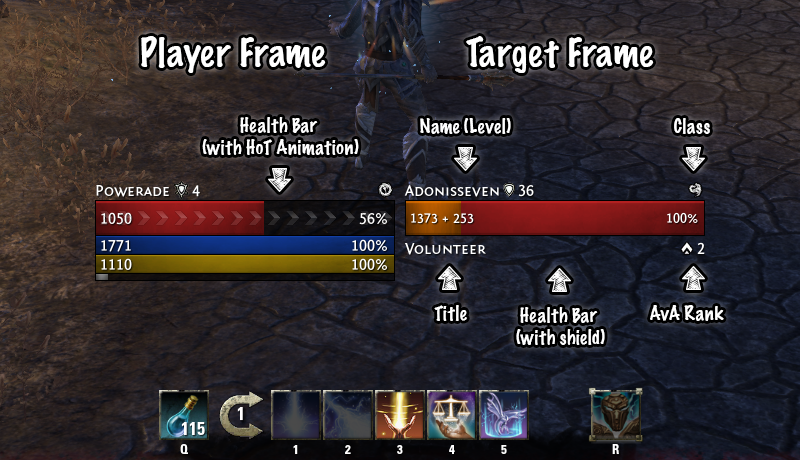
<style>
.page{position:relative;width:800px;height:460px}
.page>*{position:absolute;margin:0}
.t1{font:36px "MarkerFelt-Thin";color:#ffffff}
.t2{font:18px "MarkerFelt-Thin";color:#ffffff}
</style>
<div class="page">
<p class="t1" style="left:141px;top:36px;width:185px;height:37px">Player Frame</p>
<p class="t1" style="left:466px;top:36px;width:188px;height:37px">Target Frame</p>
<p class="t2" style="left:202px;top:117px;width:157px;height:38px;text-align:center">Health Bar <br>(with HoT Animation)</p>
<p class="t2" style="left:420px;top:118px;width:91px;height:16px">Name (Level)</p>
<p class="t2" style="left:674px;top:118px;width:36px;height:16px">Class</p>
<p class="t2" style="left:434px;top:305px;width:33px;height:16px">Title</p>
<p class="t2" style="left:650px;top:305px;width:74px;height:16px">AvA Rank</p>
<p class="t2" style="left:516px;top:307px;width:89px;height:38px;text-align:center">Health Bar <br>(with shield)</p>
</div>
